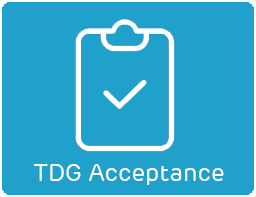
<style>
.page{position:relative;width:256px;height:197px;background:#1fa1cc}
.page>*{position:absolute;margin:0}
.t1{font:24px "Adani-Regular";color:#ffffff}
</style>
<div class="page">
<p class="t1" style="left:33px;top:164px;width:191px;height:21px">TDG Acceptance</p>
</div>
